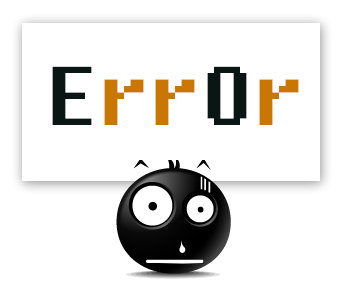
<style>
.page{position:relative;width:341px;height:288px;background:#ffffff}
.page>*{position:absolute;margin:0}
.t1{font:83px "Fixedsys";color:#c97702}
.t2{font:83px "Fixedsys";color:#091613}
</style>
<div class="page">
<p class="t1" style="left:52px;top:66px;width:247px;height:59px"><span class="t2">E</span>rr<span class="t2">O</span>r</p>
</div>
